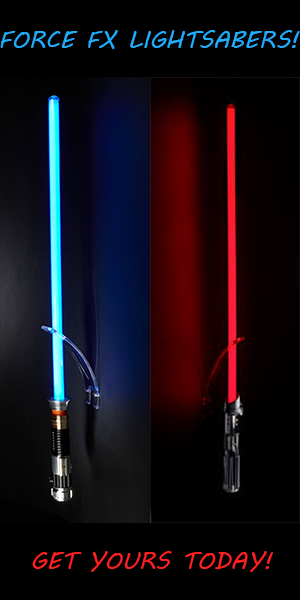
<style>
.page{position:relative;width:300px;height:600px;background:#000000}
.page>*{position:absolute;margin:0}
.t1{font:24px "MVBoli";color:#21acfc}
.t2{font:24px "MVBoli";color:#fc2121}
</style>
<div class="page">
<p class="t1" style="left:0px;top:30px;width:300px;height:19px">FORCE FX LIGHTSABERS!</p>
<p class="t2" style="left:32px;top:551px;width:241px;height:21px">GET YOURS TODAY!</p>
</div>
